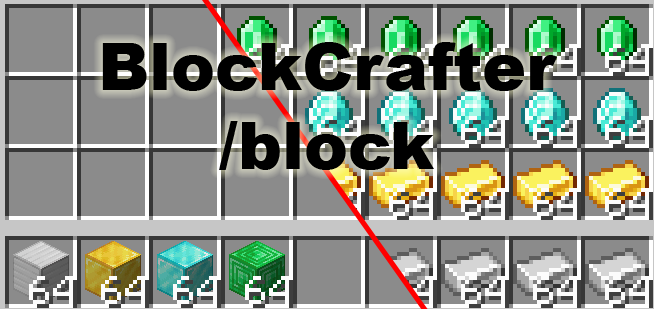
<style>
.page{position:relative;width:654px;height:309px;background:#8b8b8b}
.page>*{position:absolute;margin:0}
.t1{font:65.9px "Arial-Black";color:#000000}
</style>
<div class="page">
<p class="t1" style="left:102px;top:42px;width:455px;height:128px;text-align:center">BlockCrafter<br>/block</p>
</div>
